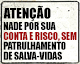
<style>
.page{position:relative;width:80px;height:64px}
.page>*{position:absolute;margin:0}
.t1{font:13.3px "Impact";letter-spacing:0.01em;color:#000000}
.t2{font:10px/9.9px "Impact";letter-spacing:-0.01em;color:#000000;scale:0.97 1}
.t3{font:10px/9.9px "Impact";letter-spacing:-0.01em;color:#9d0303;scale:0.97 1}
</style>
<div class="page">
<p class="t1" style="left:3px;top:5px;width:48px;height:16px">ATENÇÃO</p>
<p class="t2" style="left:3px;top:22px;width:74px;height:38px">NADE POR SUA<br><span class="t3">CONTA E RISCO, SEM<br></span>PATRULHAMENT0<br>DE SALVA-VIDAS</p>
</div>
